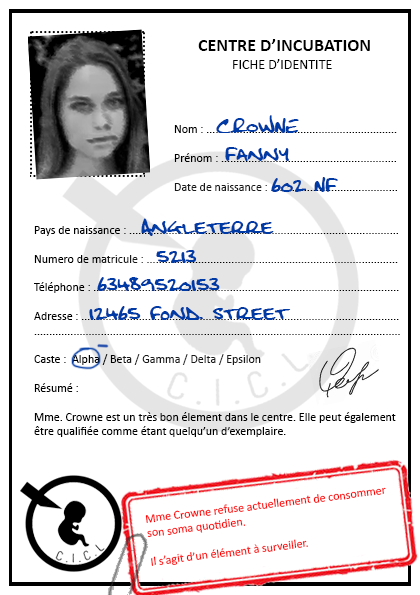
<style>
.page{position:relative;width:420px;height:595px;background:#ffffff}
.page>*{position:absolute;margin:0}
.t1{font:18px "Calibri-Bold";color:#000000}
.t2{font:14px "Calibri";color:#000000}
.t3{font:12px "Calibri"}
.t4{font:19px "FatboySlimBLTC(BRK)";color:#003aa4}
.t5{font:19px "FatboySlimBLTC2BRK";color:#003aa4}
.t6{font:12px "Calibri";color:#000000}
.t7{font:12px "Calibri";color:#fe0000}
</style>
<div class="page">
<p class="t1" style="left:198px;top:39px;width:172px;height:12px">CENTRE D’INCUBATION</p>
<p class="t2" style="left:233px;top:59px;width:99px;height:10px">FICHE D’IDENTITE</p>
<p class="t3" style="left:174px;top:125px;width:223px;height:66px">Nom : ...............................................................<br><br>Prénom : ..........................................................<br><br>Date de naissance : ..........................................</p>
<p class="t4" style="left:216px;top:115px;width:83px;height:18px">CROWNE</p>
<p class="t5" style="left:225px;top:147px;width:64px;height:14px">Fanny</p>
<p class="t5" style="left:271px;top:177px;width:67px;height:15px">602 NF</p>
<p class="t5" style="left:141px;top:218px;width:133px;height:18px">Angleterre</p>
<p class="t6" style="left:34px;top:226px;width:366px;height:211px">Pays de naissance : .........................................................................................<br><br>Numero de matricule : ...................................................................................<br><br>Téléphone : .....................................................................................................<br><br>Adresse : .........................................................................................................<br>.........................................................................................................................<br><br>Caste :  Alpha / Beta / Gamma / Delta / Epsilon <br><br>Résumé :<br><br>Mme. Crowne est un très bon élement dans le centre. Elle peut également <br>être qualifiée comme étant quelqu’un d’exemplaire.</p>
<p class="t5" style="left:156px;top:250px;width:41px;height:13px">5213</p>
<p class="t5" style="left:97px;top:277px;width:123px;height:14px">63489520153</p>
<p class="t5" style="left:89px;top:306px;width:202px;height:14px">12465 fond. street</p>
<p class="t7" style="left:145px;top:487px;width:241px;height:79px;rotate:-7deg">Mme Crowne refuse actuellement de consommer<br>son soma quotidien.<br><br>Il s’agit d’un élément à surveiller.</p>
</div>
